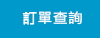
<style>
.page{position:relative;width:100px;height:38px;background:#0099cc}
.page>*{position:absolute;margin:0}
.t1{font:14px "MicrosoftJhengHeiRegular";color:#ffffff;font-weight:bold;scale:1.06 1}
</style>
<div class="page">
<p class="t1" style="left:22px;top:11px;width:60px;height:14px">訂單查詢</p>
</div>
